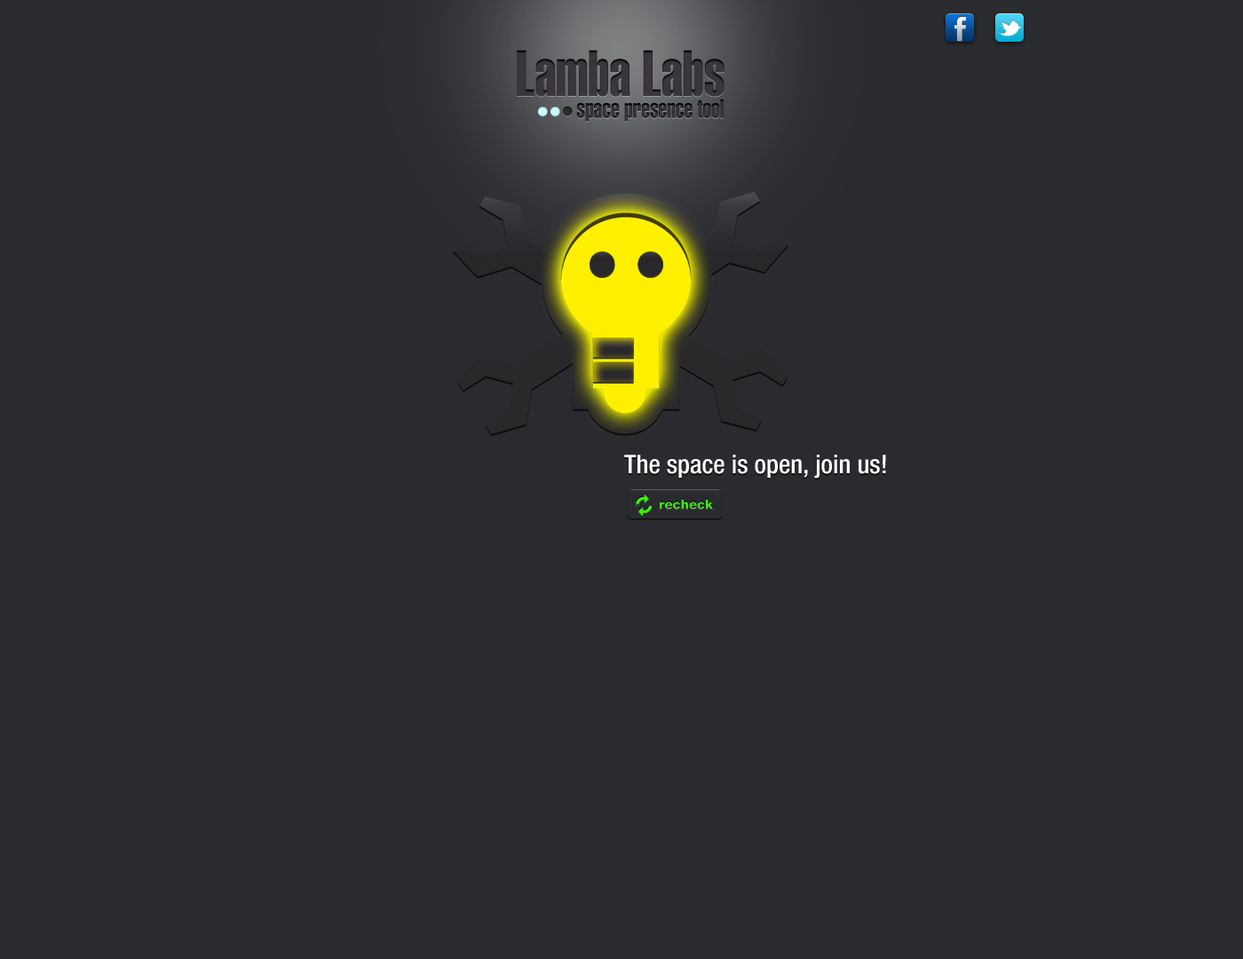
<style>
.page{position:relative;width:1243px;height:959px;background:#2a2b2f}
.page>*{position:absolute;margin:0}
.t1{font:63.9px "Helvetica-ExtraCompressed";color:#39353b}
.t2{font:25.8px "Helvetica-ExtraCompressed";color:#322e33}
.t3{font:25.8px "Helvetica67-CondensedMedium";color:#ffffff}
.t4{font:13.3px "Helvetica85-Heavy"}
</style>
<div class="page">
<p class="t1" style="left:517px;top:50px;width:208px;height:47px">Lamba Labs</p>
<p class="t2" style="left:576px;top:99px;width:148px;height:23px">space presence tool</p>
<p class="t3" style="left:624px;top:455px;width:262px;height:24px">The space is open, join us!</p>
<p class="t4" style="left:660px;top:498px;width:54px;height:11px">recheck</p>
<p class="t4" style="left:660px;top:498px;width:54px;height:11px">recheck</p>
</div>
